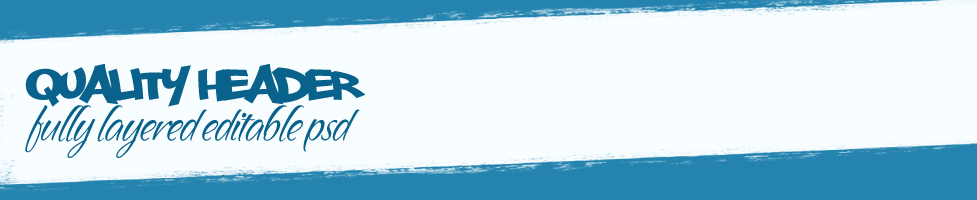
<style>
.page{position:relative;width:977px;height:200px;background:#f8fdff}
.page>*{position:absolute;margin:0}
.t1{font:62.3px "PhillySans";letter-spacing:-0.05em;color:#09628b}
.t2{font:43.1px "SandyTextHmkBold";letter-spacing:-0.05em;color:#09628b}
</style>
<div class="page">
<p class="t1" style="left:25px;top:63px;width:341px;height:44px">quality header</p>
<p class="t2" style="left:25px;top:105px;width:335px;height:53px">fully layered editable psd</p>
</div>
